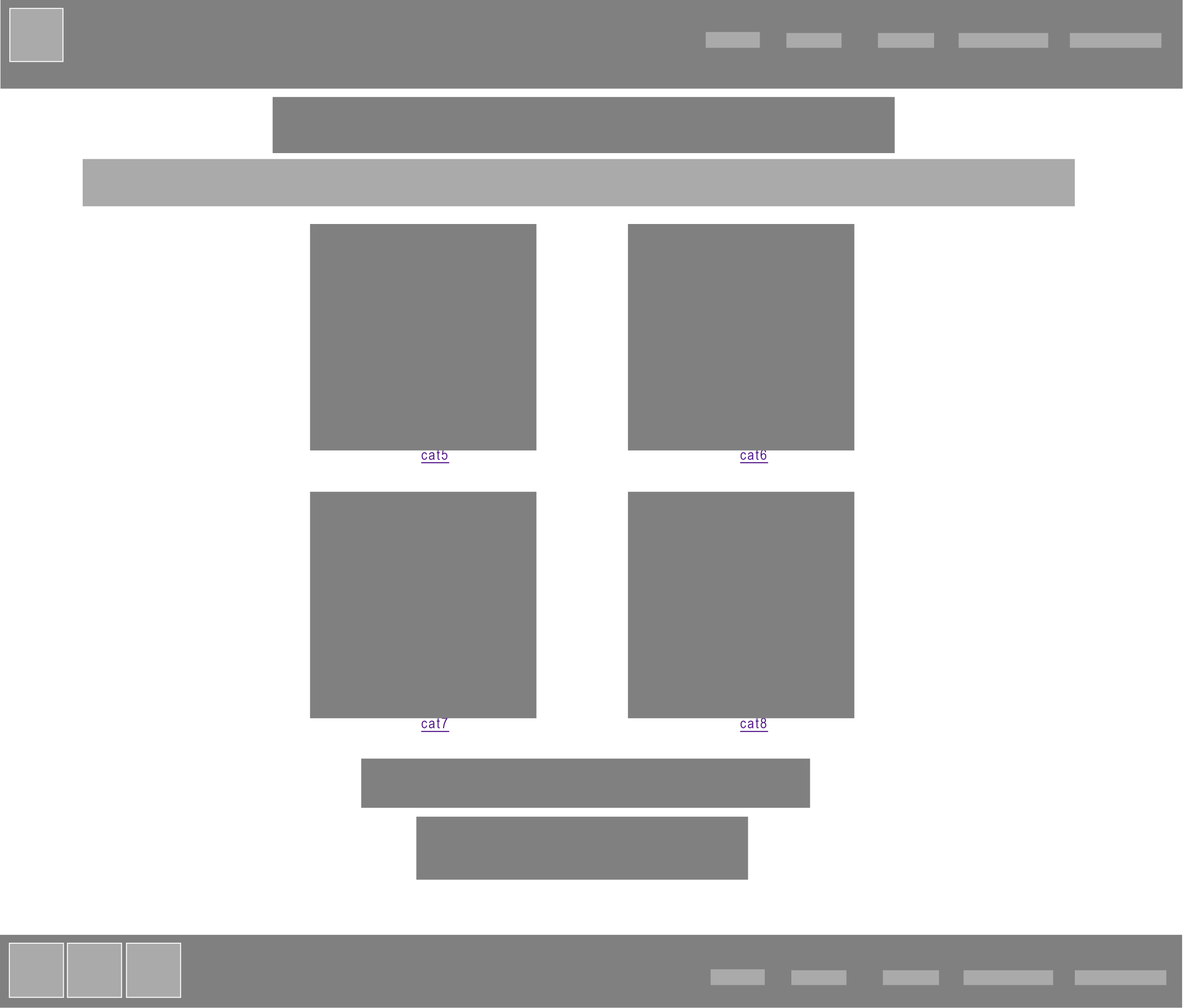
<style>
.page{position:relative;width:1183px;height:1008px;background:#ffffff}
.page>*{position:absolute;margin:0}
.t1{font:14.8px "ArialNarrow";letter-spacing:0.086em;color:#551a8b;text-decoration:underline}
</style>
<div class="page">
<p class="t1" style="left:421px;top:449px;width:28px;height:15px">cat5</p>
<p class="t1" style="left:740px;top:449px;width:28px;height:15px">cat6</p>
<p class="t1" style="left:421px;top:718px;width:28px;height:14px">cat7</p>
<p class="t1" style="left:740px;top:718px;width:28px;height:14px">cat8</p>
</div>
